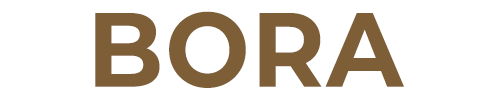
<style>
.page{position:relative;width:500px;height:100px;background:#ffffff}
.page>*{position:absolute;margin:0}
.t1{font:94.9px "Paperlogy-8ExtraBold";letter-spacing:0.05em;color:#7e5e37;text-transform:uppercase}
</style>
<div class="page">
<p class="t1" style="left:95px;top:11px;width:309px;height:77px">bora</p>
</div>
